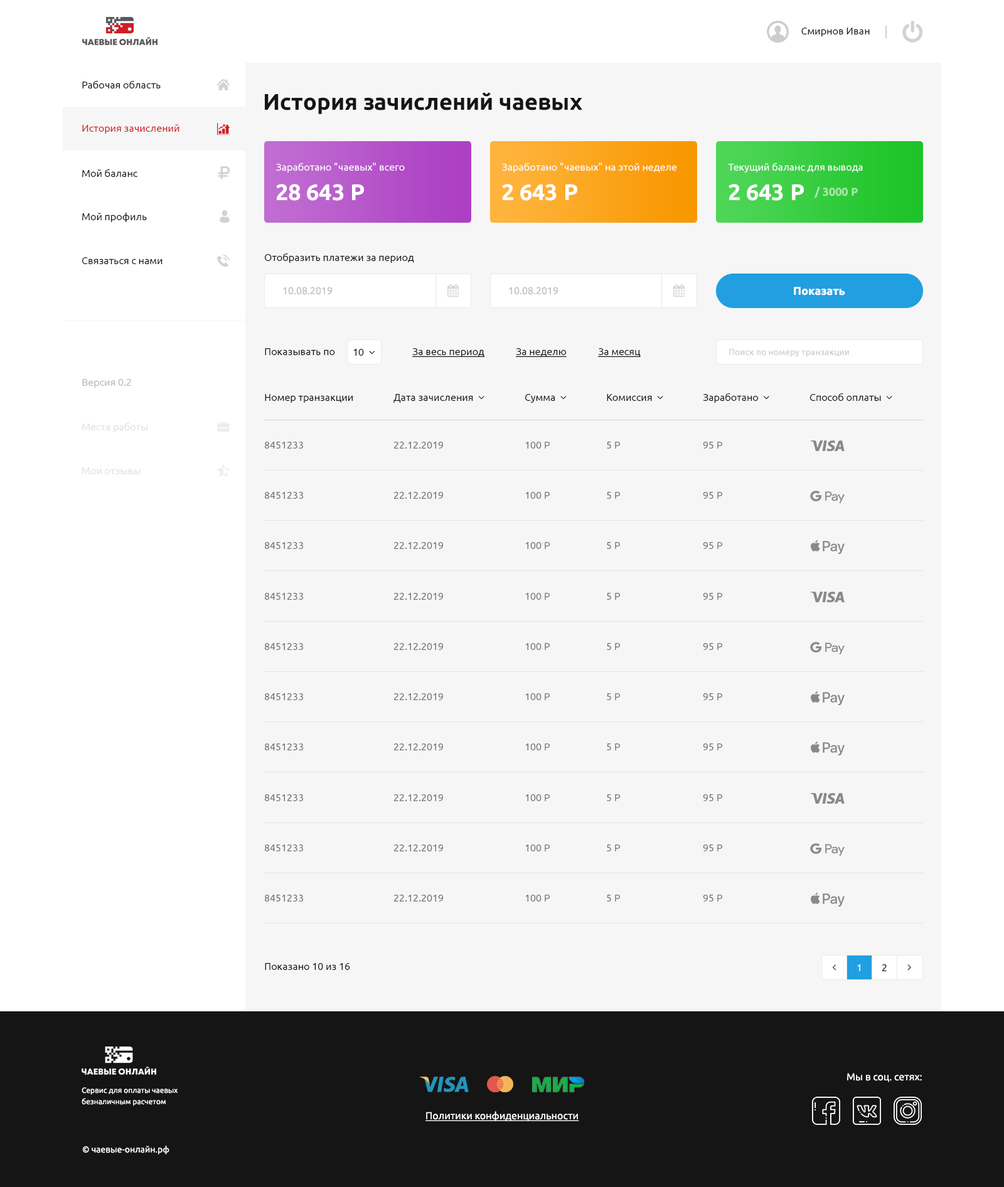
<style>
.page{position:relative;width:1004px;height:1187px;background:#f6f6f6}
.page>*{position:absolute;margin:0}
.t1{font:10px "Ubuntu-Regular";color:#151515}
.t2{font:22.6px "Ubuntu-Bold";color:#151515}
.t3{font:10px "Ubuntu-Regular";color:#cf1c24}
.t4{font:10px "Ubuntu-Regular";color:#ffffff}
.t5{font:22.6px "Ubuntu-Bold";color:#ffffff}
.t6{font:11.3px "Ubuntu-Bold";color:#ade6af}
.t7{font:10px "Ubuntu-Regular";color:#c4c4c4}
.t8{font:11.3px "Ubuntu-Bold";color:#ffffff}
.t9{font:10px "Ubuntu-Regular";color:#151515;text-decoration:underline}
.t10{font:8.8px "Ubuntu-Regular";color:#c4c4c4}
.t11{font:10px "Ubuntu-Regular";color:#b8b8b8}
.t12{font:10px "Ubuntu-Regular";color:#e1e1e1}
.t13{font:10px "Ubuntu-Regular";color:#717171}
.t14{font:10px "Ubuntu-Regular";color:#727272}
.t15{font:7.5px/5.6px "Ubuntu-Regular";color:#ffffff}
.t16{font:10px "Ubuntu-Regular";color:#ffffff;text-decoration:underline}
.t17{font:8.8px "Ubuntu-Regular";color:#ffffff}
</style>
<div class="page">
<p class="t1" style="left:801px;top:28px;width:69px;height:8px">Смирнов Иван</p>
<p class="t1" style="left:82px;top:80px;width:79px;height:8px">Рабочая область</p>
<p class="t2" style="left:265px;top:92px;width:317px;height:22px">История зачислений чаевых</p>
<p class="t3" style="left:82px;top:124px;width:97px;height:10px">История зачислений</p>
<p class="t1" style="left:82px;top:169px;width:55px;height:8px">Мой баланс</p>
<p class="t4" style="left:276px;top:163px;width:129px;height:10px">Заработано "чаевых" всего</p>
<p class="t4" style="left:502px;top:163px;width:175px;height:10px">Заработано "чаевых" на этой неделе</p>
<p class="t4" style="left:728px;top:163px;width:135px;height:10px">Текущий баланс для вывода</p>
<p class="t5" style="left:276px;top:184px;width:88px;height:17px">28 643 Р</p>
<p class="t5" style="left:502px;top:184px;width:75px;height:17px">2 643 Р</p>
<p class="t5" style="left:729px;top:184px;width:75px;height:17px">2 643 Р</p>
<p class="t6" style="left:815px;top:187px;width:43px;height:11px">/ 3000 Р</p>
<p class="t1" style="left:82px;top:212px;width:65px;height:10px">Мой профиль</p>
<p class="t1" style="left:82px;top:257px;width:81px;height:7px">Связаться с нами</p>
<p class="t1" style="left:265px;top:253px;width:149px;height:10px">Отобразить платежи за период</p>
<p class="t7" style="left:283px;top:287px;width:50px;height:8px">10.08.2019</p>
<p class="t7" style="left:509px;top:287px;width:50px;height:8px">10.08.2019</p>
<p class="t8" style="left:794px;top:287px;width:51px;height:9px">Показать</p>
<p class="t1" style="left:265px;top:348px;width:70px;height:7px">Показывать по</p>
<p class="t9" style="left:412px;top:348px;width:73px;height:9px">За весь период</p>
<p class="t9" style="left:516px;top:348px;width:51px;height:9px">За неделю</p>
<p class="t9" style="left:598px;top:348px;width:43px;height:9px">За месяц</p>
<p class="t10" style="left:729px;top:349px;width:120px;height:8px">Поиск по номеру транзакции</p>
<p class="t11" style="left:82px;top:379px;width:49px;height:9px">Версия 0.2</p>
<p class="t1" style="left:265px;top:394px;width:88px;height:9px">Номер транзакции</p>
<p class="t12" style="left:82px;top:422px;width:66px;height:10px">Места работы</p>
<p class="t13" style="left:265px;top:442px;width:38px;height:7px">8451233</p>
<p class="t14" style="left:394px;top:442px;width:49px;height:7px">22.12.2019</p>
<p class="t14" style="left:525px;top:442px;width:25px;height:7px">100 Р</p>
<p class="t14" style="left:607px;top:442px;width:13px;height:7px">5 Р</p>
<p class="t14" style="left:703px;top:442px;width:19px;height:7px">95 Р</p>
<p class="t12" style="left:82px;top:468px;width:59px;height:6px">Мои отзывы</p>
<p class="t13" style="left:265px;top:492px;width:38px;height:7px">8451233</p>
<p class="t14" style="left:394px;top:492px;width:49px;height:7px">22.12.2019</p>
<p class="t14" style="left:525px;top:492px;width:25px;height:7px">100 Р</p>
<p class="t14" style="left:607px;top:492px;width:13px;height:7px">5 Р</p>
<p class="t14" style="left:703px;top:492px;width:19px;height:7px">95 Р</p>
<p class="t13" style="left:265px;top:542px;width:38px;height:7px">8451233</p>
<p class="t14" style="left:394px;top:542px;width:49px;height:7px">22.12.2019</p>
<p class="t14" style="left:525px;top:542px;width:25px;height:7px">100 Р</p>
<p class="t14" style="left:607px;top:542px;width:13px;height:7px">5 Р</p>
<p class="t14" style="left:703px;top:542px;width:19px;height:7px">95 Р</p>
<p class="t13" style="left:265px;top:593px;width:38px;height:7px">8451233</p>
<p class="t14" style="left:394px;top:593px;width:49px;height:7px">22.12.2019</p>
<p class="t14" style="left:525px;top:593px;width:25px;height:7px">100 Р</p>
<p class="t14" style="left:607px;top:593px;width:13px;height:7px">5 Р</p>
<p class="t14" style="left:703px;top:593px;width:19px;height:7px">95 Р</p>
<p class="t13" style="left:265px;top:643px;width:38px;height:7px">8451233</p>
<p class="t14" style="left:394px;top:643px;width:49px;height:7px">22.12.2019</p>
<p class="t14" style="left:525px;top:643px;width:25px;height:7px">100 Р</p>
<p class="t14" style="left:607px;top:643px;width:13px;height:7px">5 Р</p>
<p class="t14" style="left:703px;top:643px;width:19px;height:7px">95 Р</p>
<p class="t13" style="left:265px;top:694px;width:38px;height:6px">8451233</p>
<p class="t14" style="left:394px;top:694px;width:49px;height:6px">22.12.2019</p>
<p class="t14" style="left:525px;top:694px;width:25px;height:6px">100 Р</p>
<p class="t14" style="left:607px;top:694px;width:13px;height:6px">5 Р</p>
<p class="t14" style="left:703px;top:694px;width:19px;height:6px">95 Р</p>
<p class="t13" style="left:265px;top:744px;width:38px;height:7px">8451233</p>
<p class="t14" style="left:394px;top:744px;width:49px;height:7px">22.12.2019</p>
<p class="t14" style="left:525px;top:744px;width:25px;height:7px">100 Р</p>
<p class="t14" style="left:607px;top:744px;width:13px;height:7px">5 Р</p>
<p class="t14" style="left:703px;top:744px;width:19px;height:7px">95 Р</p>
<p class="t13" style="left:265px;top:795px;width:38px;height:6px">8451233</p>
<p class="t14" style="left:394px;top:795px;width:49px;height:6px">22.12.2019</p>
<p class="t14" style="left:525px;top:795px;width:25px;height:6px">100 Р</p>
<p class="t14" style="left:607px;top:795px;width:13px;height:6px">5 Р</p>
<p class="t14" style="left:703px;top:795px;width:19px;height:6px">95 Р</p>
<p class="t13" style="left:265px;top:845px;width:38px;height:7px">8451233</p>
<p class="t14" style="left:394px;top:845px;width:49px;height:7px">22.12.2019</p>
<p class="t14" style="left:525px;top:845px;width:25px;height:7px">100 Р</p>
<p class="t14" style="left:607px;top:845px;width:13px;height:7px">5 Р</p>
<p class="t14" style="left:703px;top:845px;width:19px;height:7px">95 Р</p>
<p class="t13" style="left:265px;top:895px;width:38px;height:7px">8451233</p>
<p class="t14" style="left:394px;top:895px;width:49px;height:7px">22.12.2019</p>
<p class="t14" style="left:525px;top:895px;width:25px;height:7px">100 Р</p>
<p class="t14" style="left:607px;top:895px;width:13px;height:7px">5 Р</p>
<p class="t14" style="left:703px;top:895px;width:19px;height:7px">95 Р</p>
<p class="t1" style="left:265px;top:963px;width:85px;height:7px">Показано 10 из 16</p>
<p class="t4" style="left:857px;top:965px;width:3px;height:7px">1</p>
<p class="t1" style="left:882px;top:965px;width:5px;height:7px">2</p>
<p class="t4" style="left:847px;top:1073px;width:75px;height:10px">Мы в соц. сетях:</p>
<p class="t15" style="left:82px;top:1088px;width:96px;height:18px">Сервис для оплаты чаевых<br><br>безналичным расчетом</p>
<p class="t16" style="left:426px;top:1112px;width:153px;height:10px">Политики конфиденциальности</p>
<p class="t17" style="left:82px;top:1146px;width:87px;height:9px">© чаевые-онлайн.рф</p>
</div>
